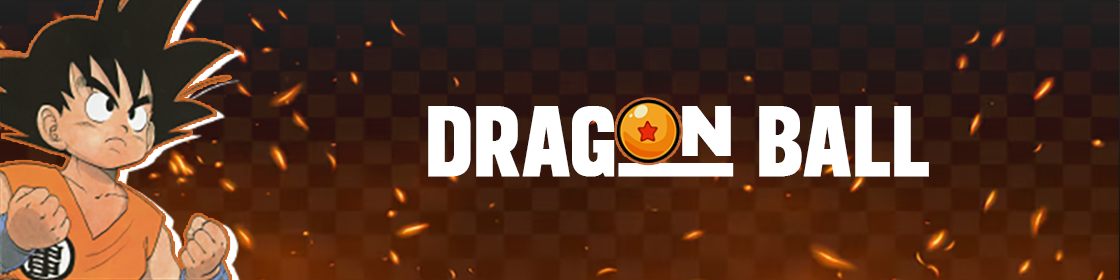
<style>
.page{position:relative;width:1120px;height:280px}
.page>*{position:absolute;margin:0}
.t1{font:99.2px "Organetto-BoldUltraCnd";color:#ffffff;font-weight:bold}
</style>
<div class="page">
<p class="t1" style="left:428px;top:106px;width:501px;height:71px">Dragon Ball</p>
</div>
